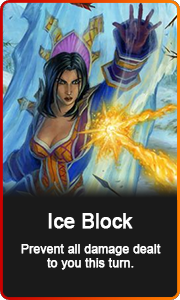
<style>
.page{position:relative;width:180px;height:300px;background:#1a1a1a}
.page>*{position:absolute;margin:0}
.t1{font:19.9px "ArialMT";color:#ffffff;font-weight:bold}
.t2{font:11.9px "ArialMT";color:#ffffff;font-weight:bold}
</style>
<div class="page">
<p class="t1" style="left:48px;top:213px;width:85px;height:16px">Ice Block</p>
<p class="t2" style="left:21px;top:244px;width:140px;height:26px;text-align:center">Prevent all damage dealt<br>to you this turn.</p>
</div>
